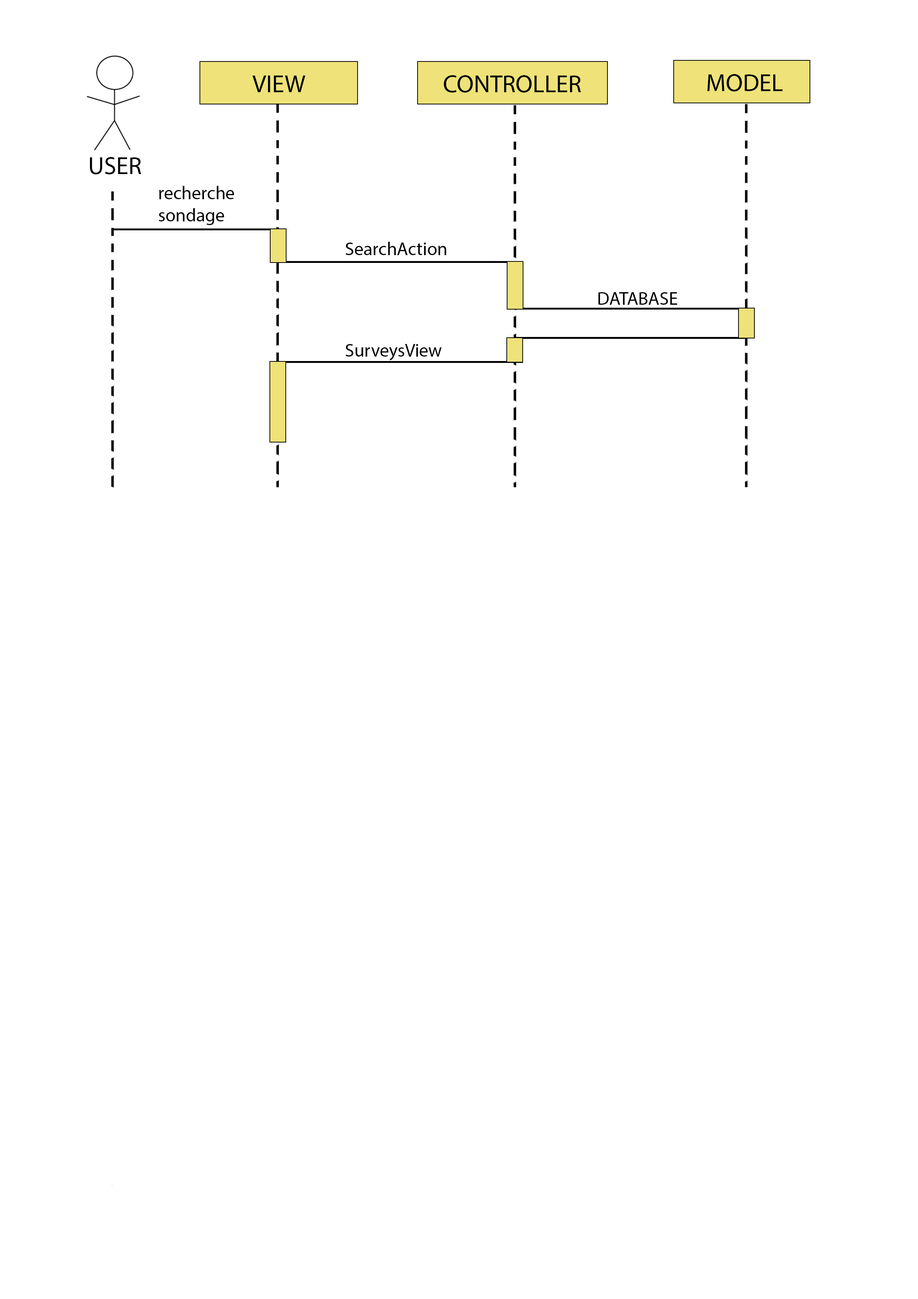
<style>
.page{position:relative;width:918px;height:1299px;background:#ffffff}
.page>*{position:absolute;margin:0}
.t1{font:24.7px "MyriadPro-Regular";color:#000000}
.t2{font:18.5px "MyriadPro-Regular";color:#000000}
</style>
<div class="page">
<p class="t1" style="left:252px;top:76px;width:53px;height:16px">VIEW</p>
<p class="t1" style="left:444px;top:75px;width:137px;height:18px">CONTROLLER</p>
<p class="t1" style="left:707px;top:74px;width:76px;height:17px">MODEL</p>
<p class="t1" style="left:90px;top:157px;width:51px;height:17px">USER</p>
<p class="t2" style="left:159px;top:186px;width:75px;height:39px">recherche <br>sondage</p>
<p class="t2" style="left:345px;top:242px;width:101px;height:13px">SearchAction</p>
<p class="t2" style="left:598px;top:292px;width:80px;height:13px">DATABASE</p>
<p class="t2" style="left:345px;top:344px;width:97px;height:17px">SurveysView</p>
</div>
